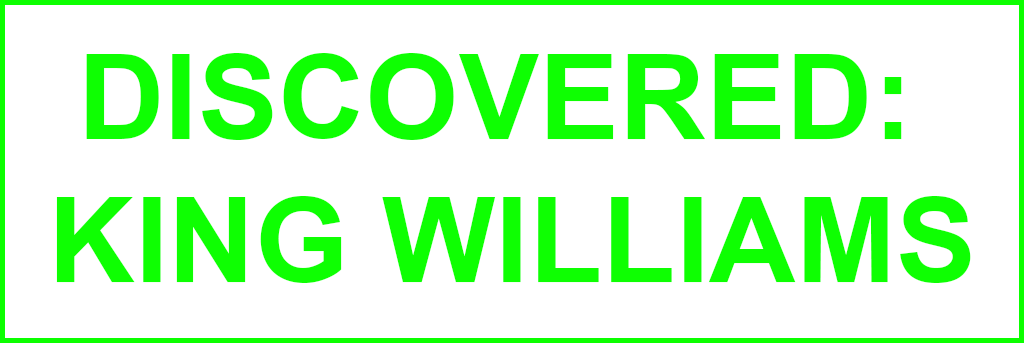
<style>
.page{position:relative;width:1024px;height:343px;background:#ffffff}
.page>*{position:absolute;margin:0}
.t1{font:119.3px "Arial-BoldMT";color:#0eff02}
</style>
<div class="page">
<p class="t1" style="left:56px;top:53px;width:915px;height:230px;text-align:center">DISCOVERED: <br>KING WILLIAMS</p>
</div>
